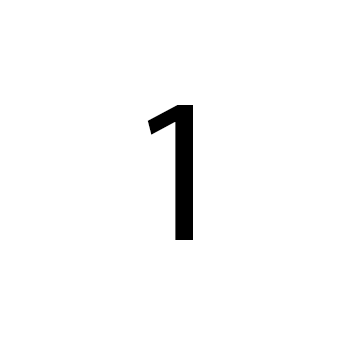
<style>
.page{position:relative;width:354px;height:354px;background:#ffffff}
.page>*{position:absolute;margin:0}
.t1{font:208.3px "MyriadPro-Regular";color:#000000}
</style>
<div class="page">
<p class="t1" style="left:147px;top:105px;width:46px;height:135px">1</p>
</div>
